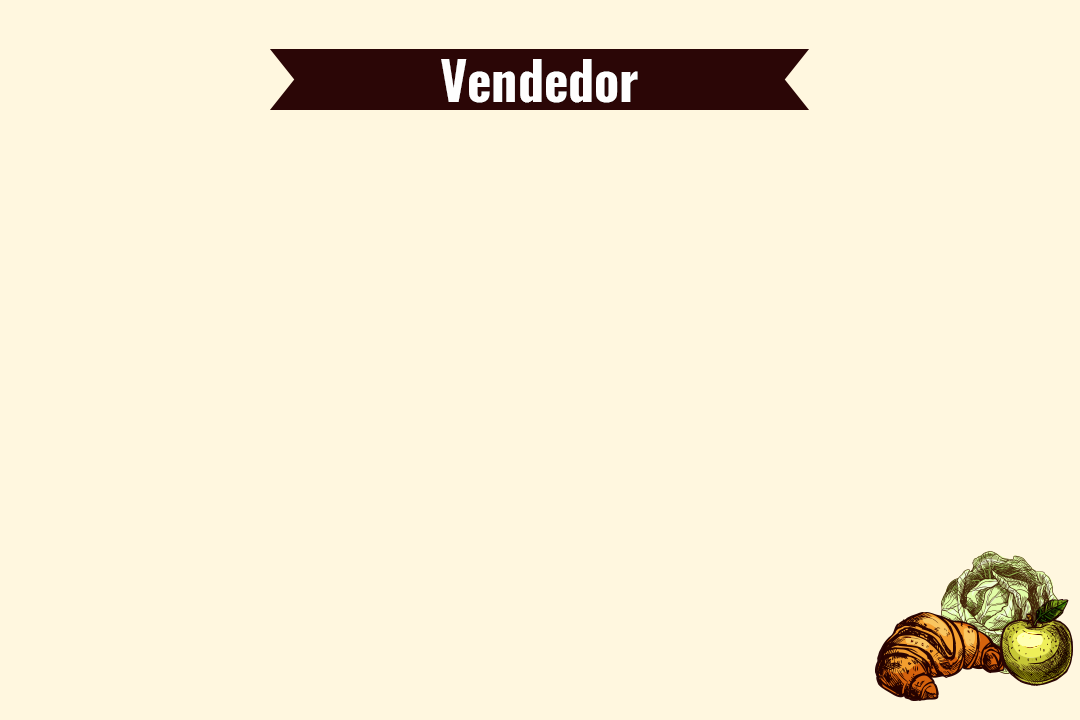
<style>
.page{position:relative;width:1080px;height:720px;background:#fff7df}
.page>*{position:absolute;margin:0}
.t1{font:51.7px "Oswald-Bold";color:#fefefe}
</style>
<div class="page">
<p class="t1" style="left:441px;top:59px;width:197px;height:44px">Vendedor</p>
</div>
